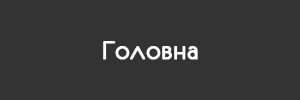
<style>
.page{position:relative;width:300px;height:100px;background:#333333}
.page>*{position:absolute;margin:0}
.t1{font:29.2px "Eurofurenceregular";color:#ffffff;font-weight:bold}
</style>
<div class="page">
<p class="t1" style="left:103px;top:41px;width:95px;height:19px">Головна</p>
</div>
